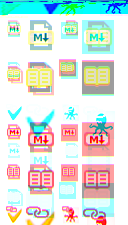
<style>
.page{position:relative;width:128px;height:225px;background:#ffffff}
.page>*{position:absolute;margin:0}
.t1{font:10px "BitstreamVeraSans-Bold"}
</style>
<div class="page">
<p class="t1" style="left:34px;top:19px;width:8px;height:8px">M</p>
<p class="t1" style="left:34px;top:142px;width:8px;height:8px">M</p>
</div>
